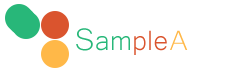
<style>
.page{position:relative;width:231px;height:73px;background:#ffffff}
.page>*{position:absolute;margin:0}
.t1{font:36px "Microsoft-Yi-Baiti";color:#da542e}
.t2{font:40px "Microsoft-Yi-Baiti";color:#28b779}
.t3{font:36px "Microsoft-Yi-Baiti";color:#28b779}
.t4{font:36px "Microsoft-Yi-Baiti";color:#ffb848}
.t5{font:36px "Microsoft-Yi-Baiti";color:#ffffff}
</style>
<div class="page">
<p class="t1" style="left:76px;top:28px;width:140px;height:27px"><span class="t2">S</span><span class="t3">am</span>ple <span class="t4">A</span><span class="t5">pp</span></p>
</div>
